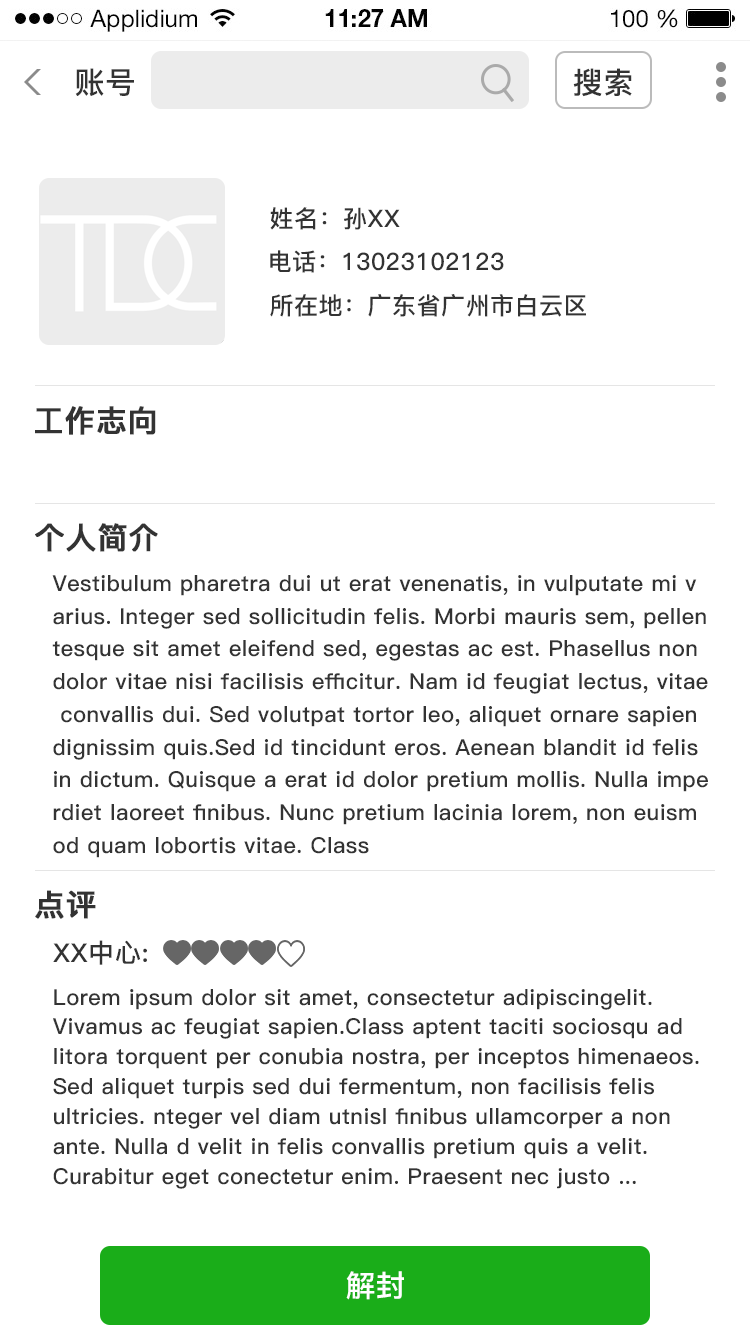
<style>
.page{position:relative;width:750px;height:1334px;background:#ffffff}
.page>*{position:absolute;margin:0}
.t1{font:30px "PingFang-SC-Bold";letter-spacing:0.02em;color:#333333;text-transform:uppercase}
.t2{font:24px "PingFang-SC-Bold";letter-spacing:0.02em;color:#333333;text-transform:uppercase}
.t3{font:30px "PingFang-SC-Bold";letter-spacing:0.02em;color:#333333;text-transform:uppercase;font-weight:bold}
.t4{font:22px/32.7px "PingFang-SC-Bold";letter-spacing:0.02em;color:#333333}
.t5{font:26px "PingFang-SC-Bold";letter-spacing:0.02em;color:#333333;text-transform:uppercase}
.t6{font:22px/30px "PingFang-SC-Bold";letter-spacing:0.02em;color:#333333}
.t7{font:30px "PingFang-SC-Bold";color:#ffffff}
</style>
<div class="page">
<p class="t1" style="left:75px;top:68px;width:59px;height:28px">账号</p>
<p class="t1" style="left:573px;top:68px;width:59px;height:29px">搜索</p>
<p class="t2" style="left:270px;top:207px;width:130px;height:23px">姓名：孙xx</p>
<p class="t2" style="left:270px;top:250px;width:234px;height:23px">电话：13023102123</p>
<p class="t2" style="left:270px;top:294px;width:316px;height:23px">所在地：广东省广州市白云区</p>
<p class="t3" style="left:35px;top:406px;width:121px;height:29px">工作志向</p>
<p class="t3" style="left:35px;top:523px;width:123px;height:29px">个人简介</p>
<p class="t4" style="left:52px;top:575px;width:656px;height:283px">Vestibulum pharetra dui ut erat venenatis, in vulputate mi v<br>arius. Integer sed sollicitudin felis. Morbi mauris sem, pellen<br>tesque sit amet eleifend sed, egestas ac est. Phasellus non <br>dolor vitae nisi facilisis efficitur. Nam id feugiat lectus, vitae<br> convallis dui. Sed volutpat tortor leo, aliquet ornare sapien <br>dignissim quis.Sed id tincidunt eros. Aenean blandit id felis <br>in dictum. Quisque a erat id dolor pretium mollis. Nulla impe<br>rdiet laoreet finibus. Nunc pretium lacinia lorem, non euism<br>od quam lobortis vitae. Class</p>
<p class="t3" style="left:35px;top:890px;width:61px;height:29px">点评</p>
<p class="t5" style="left:53px;top:940px;width:94px;height:25px">xx中心:</p>
<p class="t6" style="left:53px;top:989px;width:646px;height:200px">Lorem ipsum dolor sit amet, consectetur adipiscingelit. <br>Vivamus ac feugiat sapien.Class aptent taciti sociosqu ad <br>litora torquent per conubia nostra, per inceptos himenaeos. <br>Sed aliquet turpis sed dui fermentum, non facilisis felis <br>ultricies. nteger vel diam utnisl finibus ullamcorper a non <br>ante. Nulla d velit in felis convallis pretium quis a velit. <br>Curabitur eget conectetur enim. Praesent nec justo ...</p>
<p class="t7" style="left:346px;top:1271px;width:58px;height:29px">解封</p>
</div>
